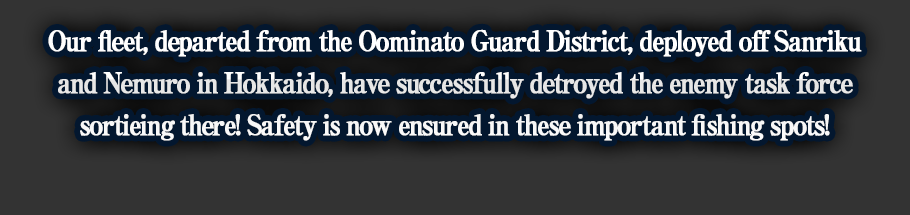
<style>
.page{position:relative;width:910px;height:215px;background:#333333}
.page>*{position:absolute;margin:0}
.t1{font:28px/42px "RyuminPro-ExBold";letter-spacing:-0.08em;color:#ffffff;font-weight:bold;scale:0.9 1}
</style>
<div class="page">
<p class="t1" style="left:48px;top:29px;width:814px;height:112px;text-align:center">Our fleet, departed from the Oominato Guard District, deployed off Sanriku<br>and Nemuro in Hokkaido, have successfully detroyed the enemy task force<br>sortieing there! Safety is now ensured in these important fishing spots!</p>
</div>
